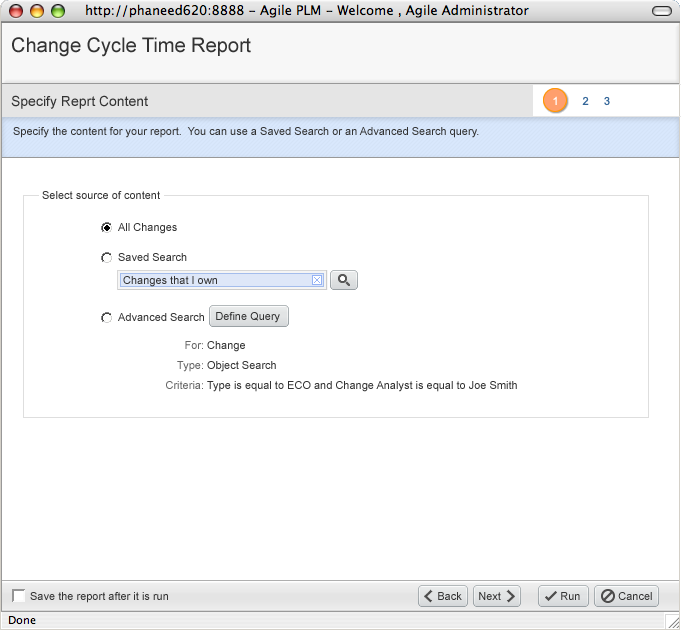
<style>
.page{position:relative;width:681px;height:630px;background:#ffffff}
.page>*{position:absolute;margin:0}
.t1{font:20px "ArialMT";color:#333333}
.t2{font:14px "ArialMT";color:#333333}
.t3{font:11px "ArialMT";color:#ffffff}
.t4{font:11px "ArialMT";color:#336699}
.t5{font:11px "ArialMT";color:#333333}
.t6{font:11px/20px "ArialMT";color:#666666}
.t7{font:11px/20px "ArialMT";color:#333333}
</style>
<div class="page">
<p class="t1" style="left:12px;top:37px;width:239px;height:20px">Change Cycle Time Report</p>
<p class="t2" style="left:11px;top:95px;width:137px;height:14px">Specify Reprt Content</p>
<p class="t3" style="left:553px;top:96px;width:4px;height:9px">1</p>
<p class="t4" style="left:582px;top:96px;width:28px;height:10px">2     3</p>
<p class="t5" style="left:13px;top:127px;width:466px;height:11px">Specify the content for your report.  You can use a Saved Search or an Advanced Search query.</p>
<p class="t5" style="left:42px;top:191px;width:118px;height:8px">Select source of content</p>
<p class="t5" style="left:118px;top:223px;width:59px;height:11px">All Changes</p>
<p class="t5" style="left:118px;top:253px;width:69px;height:8px">Saved Search</p>
<p class="t5" style="left:123px;top:276px;width:94px;height:11px">Changes that I own</p>
<p class="t5" style="left:118px;top:313px;width:86px;height:8px">Advanced Search</p>
<p class="t5" style="left:216px;top:312px;width:64px;height:11px">Define Query</p>
<p class="t6" style="left:166px;top:341px;width:37px;height:48px;text-align:right">For:<br>    Type:<br>Criteria:</p>
<p class="t7" style="left:207px;top:341px;width:310px;height:51px">Change<br>Object Search<br>Type is equal to ECO and Change Analyst is equal to Joe Smith</p>
<p class="t5" style="left:30px;top:592px;width:138px;height:11px">Save the report after it is run</p>
<p class="t5" style="left:438px;top:592px;width:24px;height:8px">Back</p>
<p class="t5" style="left:479px;top:592px;width:22px;height:8px">Next</p>
<p class="t5" style="left:561px;top:592px;width:19px;height:8px">Run</p>
<p class="t5" style="left:618px;top:592px;width:34px;height:8px">Cancel</p>
</div>
